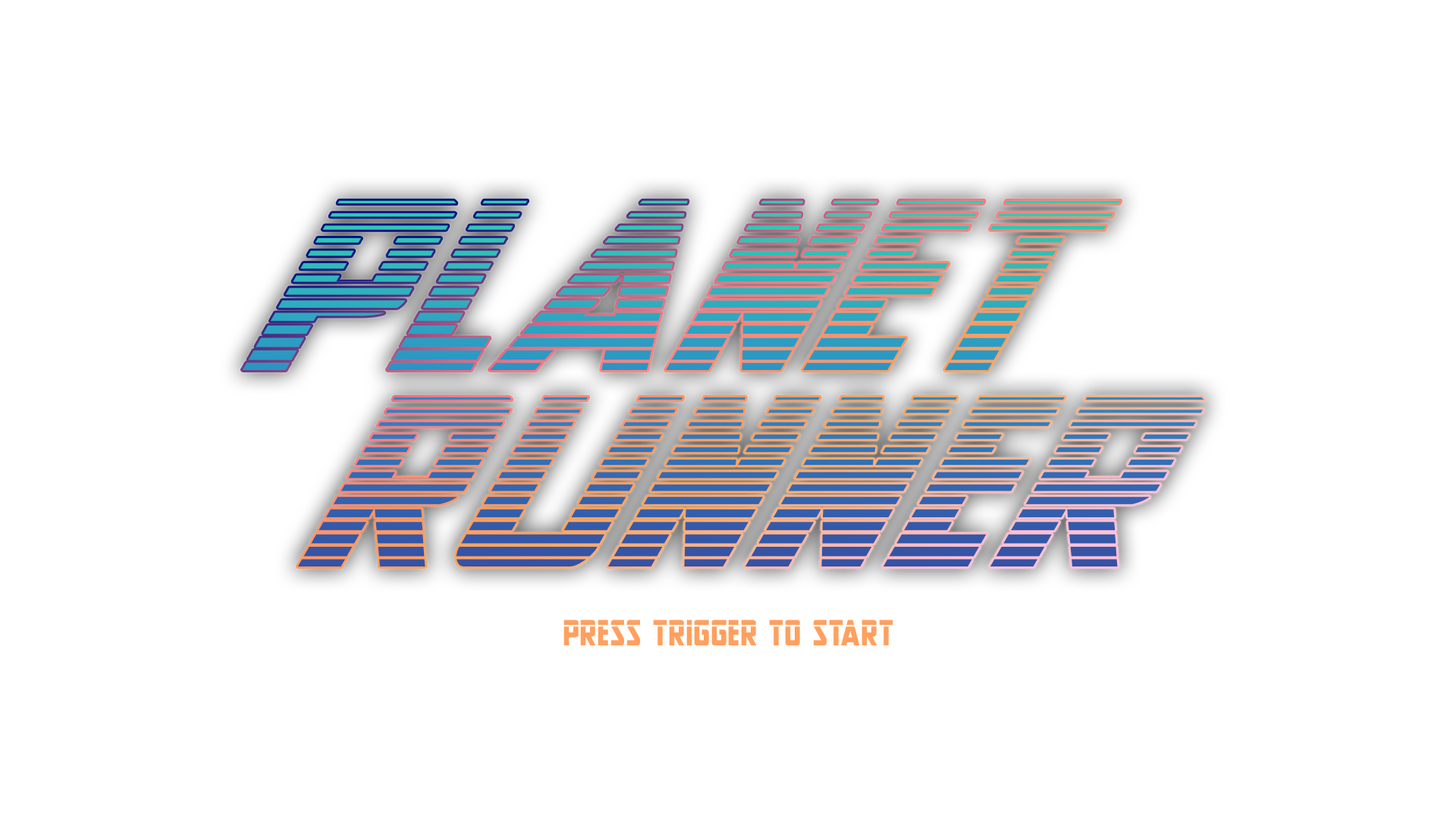
<style>
.page{position:relative;width:1456px;height:819px;background:#ffffff}
.page>*{position:absolute;margin:0}
.t1{font:280.6px "NewComicTitleGradient";scale:1.09 1}
.t2{font:280.6px/226.2px "NewComicTitleGradient";scale:1.09 1}
.t3{font:35.7px "NewComicTitleLaser";color:#ffa05e}
</style>
<div class="page">
<p class="t1" style="left:242px;top:200px;width:962px;height:366px;text-align:center">Planet<br><span class="t2">    Runner</span></p>
<p class="t3" style="left:563px;top:620px;width:330px;height:25px">press trigger to start</p>
</div>
